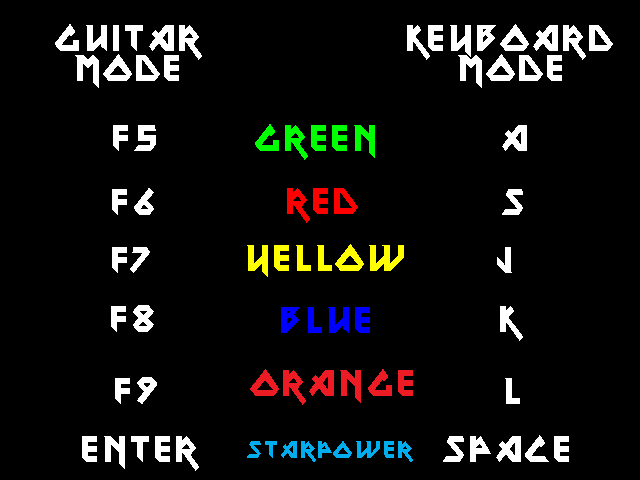
<style>
.page{position:relative;width:640px;height:480px;background:#000000}
.page>*{position:absolute;margin:0}
.t1{font:35.9px/29.9px "Metal-Lord";color:#ffffff}
.t2{font:35.9px "Metal-Lord";color:#ffffff}
.t3{font:35.9px "Metal-Lord";color:#00ff00}
.t4{font:35.9px "Metal-Lord";color:#ff0000}
.t5{font:35.9px "Metal-Lord";color:#ffff00}
.t6{font:35.9px "Metal-Lord";color:#0000ff}
.t7{font:35.9px "Metal-Lord";color:#ed1c24}
.t8{font:23.9px "Metal-Lord";color:#00adef}
</style>
<div class="page">
<p class="t1" style="left:55px;top:24px;width:147px;height:64px;text-align:center">Guitar<br>mode</p>
<p class="t1" style="left:407px;top:24px;width:206px;height:64px;text-align:center">Keyboard<br>mode</p>
<p class="t2" style="left:113px;top:125px;width:414px;height:26px">F5                 A</p>
<p class="t3" style="left:255px;top:124px;width:120px;height:36px">Green</p>
<p class="t2" style="left:112px;top:188px;width:411px;height:27px">F6                 S</p>
<p class="t4" style="left:287px;top:188px;width:71px;height:35px">RED</p>
<p class="t5" style="left:247px;top:244px;width:157px;height:33px">Yellow</p>
<p class="t2" style="left:112px;top:247px;width:400px;height:26px">F7                 J</p>
<p class="t2" style="left:111px;top:305px;width:412px;height:36px">F8                 K</p>
<p class="t6" style="left:281px;top:307px;width:89px;height:26px">Blue</p>
<p class="t2" style="left:115px;top:377px;width:405px;height:27px">F9                 L</p>
<p class="t7" style="left:250px;top:369px;width:163px;height:36px">Orange</p>
<p class="t2" style="left:82px;top:435px;width:487px;height:36px">Enter            Space</p>
<p class="t8" style="left:247px;top:441px;width:166px;height:21px">Starpower</p>
</div>
